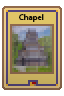
<style>
.page{position:relative;width:64px;height:96px}
.page>*{position:absolute;margin:0}
.t1{font:8px "MyriadPro-Regular";color:#0c0801;font-weight:bold}
</style>
<div class="page">
<p class="t1" style="left:19px;top:14px;width:25px;height:8px">Chapel</p>
</div>
